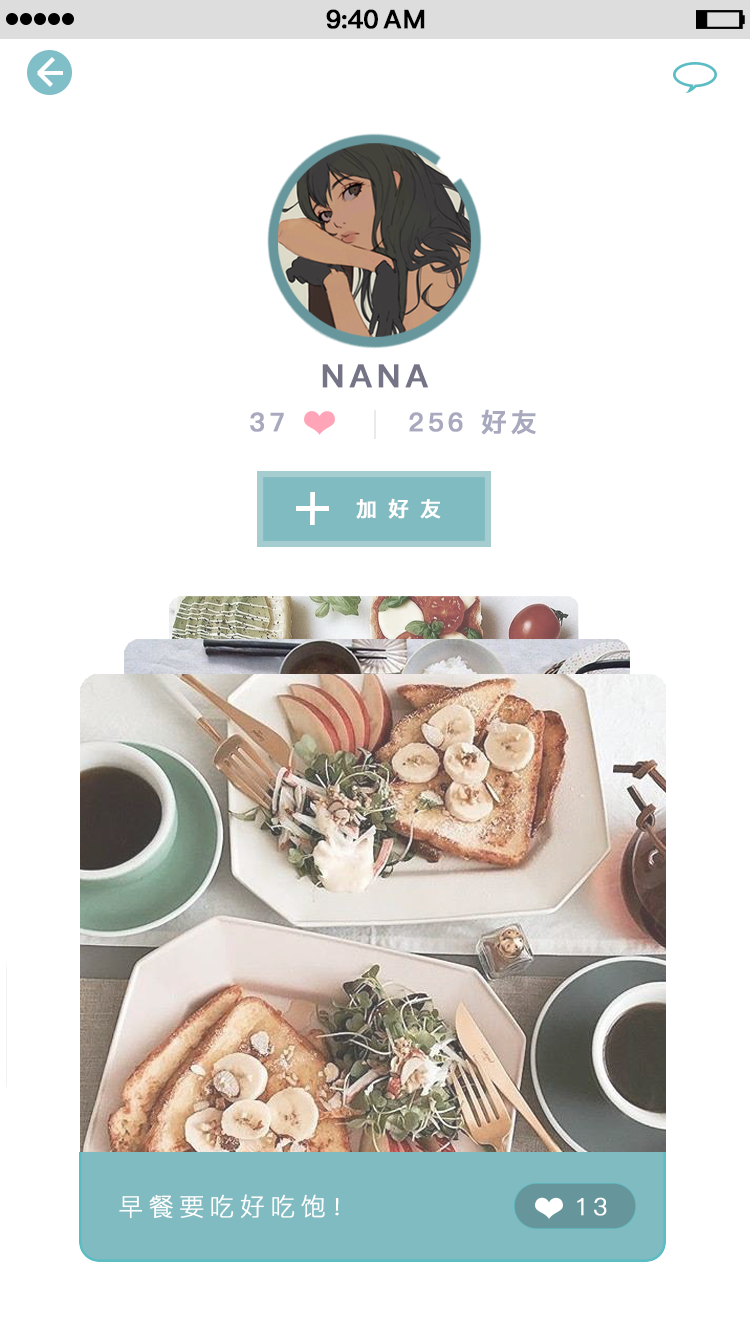
<style>
.page{position:relative;width:750px;height:1334px;background:#ffffff}
.page>*{position:absolute;margin:0}
.t1{font:25.4px "PingFang-SC-Bold";letter-spacing:-0.028em;color:#000000;font-weight:bold}
.t2{font:25.4px "PingFang-SC-Bold";letter-spacing:0.052em;color:#000000;font-weight:bold}
.t3{font:32px "PingFang-SC-Bold";letter-spacing:0.143em;color:#757486;font-weight:bold}
.t4{font:25.7px "PingFang-SC-Bold";letter-spacing:0.143em;color:#a8a9be;font-weight:bold}
.t5{font:20.7px "PingFang-SC-Bold";letter-spacing:0.523em;color:#ffffff;font-weight:bold}
.t6{font:24.7px "PingFang-SC-Light";letter-spacing:0.203em;color:#ffffff;font-weight:bold}
.t7{font:23.7px "PingFang-SC-Regular";letter-spacing:0.203em;color:#ffffff;font-weight:bold}
.t8{font:23.7px "PingFang-SC-Regular";letter-spacing:0.143em;color:#ffffff;font-weight:bold}
</style>
<div class="page">
<p class="t1" style="left:326px;top:9px;width:52px;height:20px">9:40</p>
<p class="t2" style="left:383px;top:9px;width:42px;height:20px">AM</p>
<p class="t3" style="left:322px;top:364px;width:106px;height:24px">NANA</p>
<p class="t4" style="left:250px;top:412px;width:34px;height:20px">37</p>
<p class="t4" style="left:409px;top:409px;width:127px;height:26px">256 好友</p>
<p class="t5" style="left:356px;top:498px;width:85px;height:21px">加好友</p>
<p class="t6" style="left:119px;top:1194px;width:220px;height:25px">早餐要吃好吃饱<span class="t7">！</span></p>
<p class="t8" style="left:577px;top:1197px;width:30px;height:19px">13</p>
</div>
